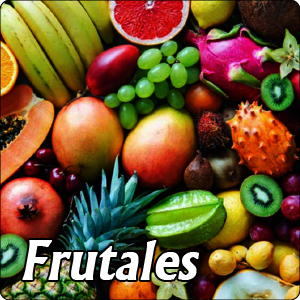
<style>
.page{position:relative;width:300px;height:300px}
.page>*{position:absolute;margin:0}
.t1{font:55.6px "Narkisim";color:#ffffff;font-weight:bold;font-style:italic}
</style>
<div class="page">
<p class="t1" style="left:22px;top:240px;width:177px;height:40px">Frutales</p>
</div>
